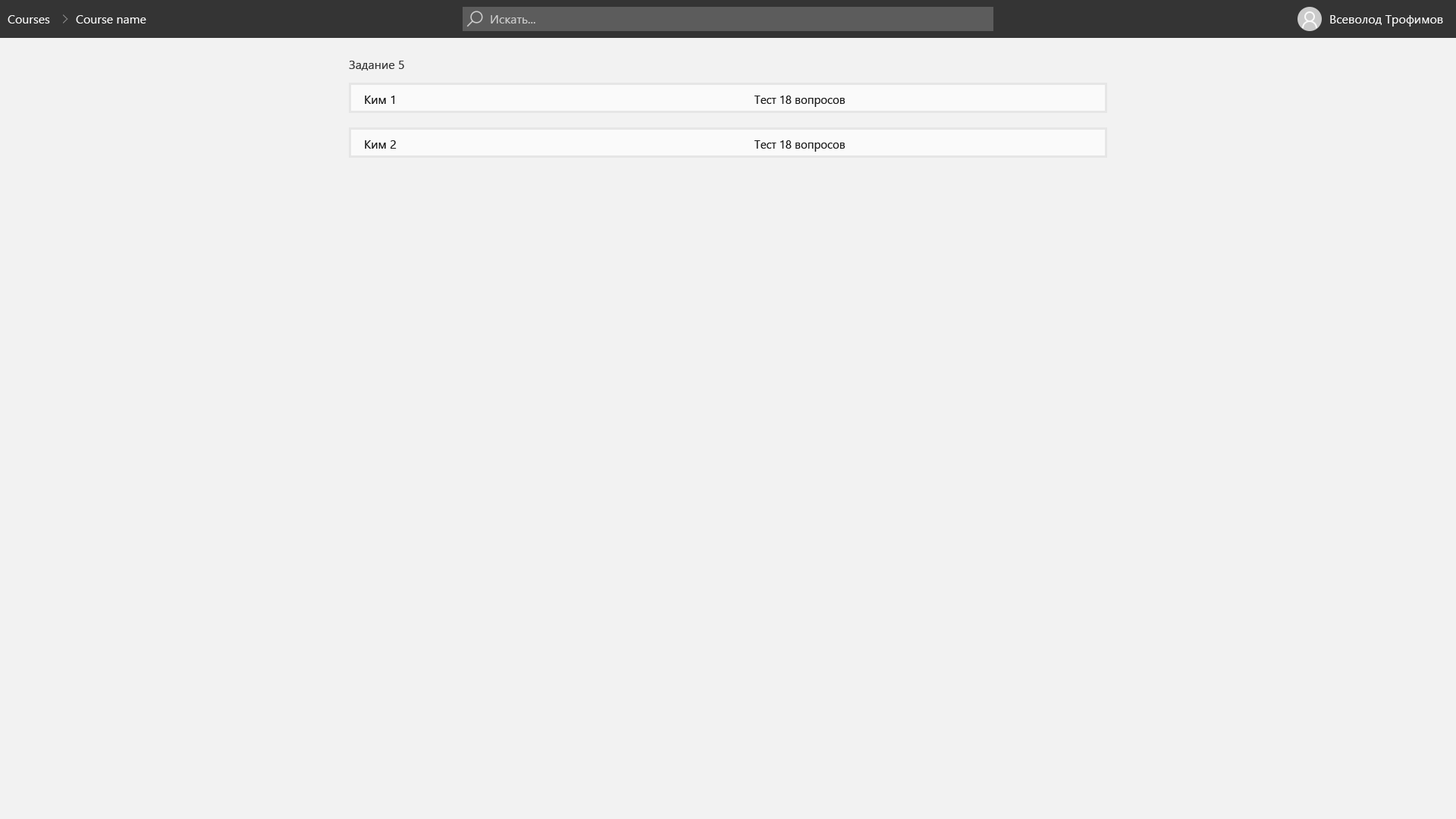
<style>
.page{position:relative;width:1456px;height:819px;background:#f2f2f2}
.page>*{position:absolute;margin:0}
.t1{font:12.1px "SegoeUI";color:#fafafa}
.t2{font:12.1px "SegoeUI";color:#cbcbcb}
.t3{font:12.1px "SegoeUI";color:#373737}
.t4{font:12.1px "SegoeUI";color:#1b1b1b}
.t5{font:12.1px "SegoeUI";color:#1b1b1b;scale:0.94 1}
</style>
<div class="page">
<p class="t1" style="left:8px;top:15px;width:42px;height:9px">Courses</p>
<p class="t1" style="left:76px;top:15px;width:70px;height:9px">Course name</p>
<p class="t2" style="left:491px;top:15px;width:44px;height:9px">Искать...</p>
<p class="t1" style="left:1330px;top:15px;width:113px;height:12px">Всеволод Трофимов</p>
<p class="t3" style="left:349px;top:61px;width:55px;height:10px">Задание 5</p>
<p class="t4" style="left:365px;top:96px;width:29px;height:8px">Ким 1</p>
<p class="t5" style="left:754px;top:96px;width:91px;height:11px">Тест 18 вопросов</p>
<p class="t4" style="left:365px;top:140px;width:32px;height:9px">Ким 2</p>
<p class="t5" style="left:754px;top:140px;width:91px;height:12px">Тест 18 вопросов</p>
</div>
